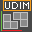
<style>
.page{position:relative;width:32px;height:32px;background:#484848}
.page>*{position:absolute;margin:0}
.t1{font:10px "GillSans";color:#ffffff}
</style>
<div class="page">
<p class="t1" style="left:5px;top:2px;width:24px;height:7px">UDIM</p>
</div>
